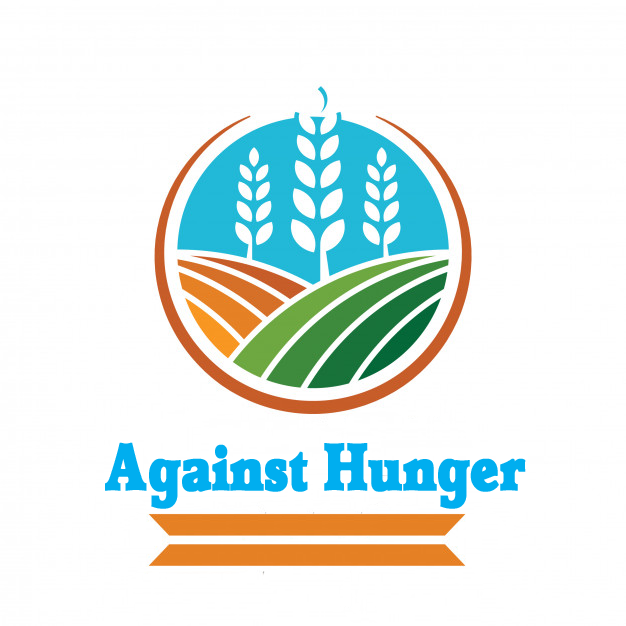
<style>
.page{position:relative;width:626px;height:626px;background:#ffffff}
.page>*{position:absolute;margin:0}
.t1{font:65.5px "Detente";color:#00aeef;font-weight:bold;scale:0.82 1}
</style>
<div class="page">
<p class="t1" style="left:105px;top:442px;width:421px;height:67px">Against Hunger</p>
</div>
